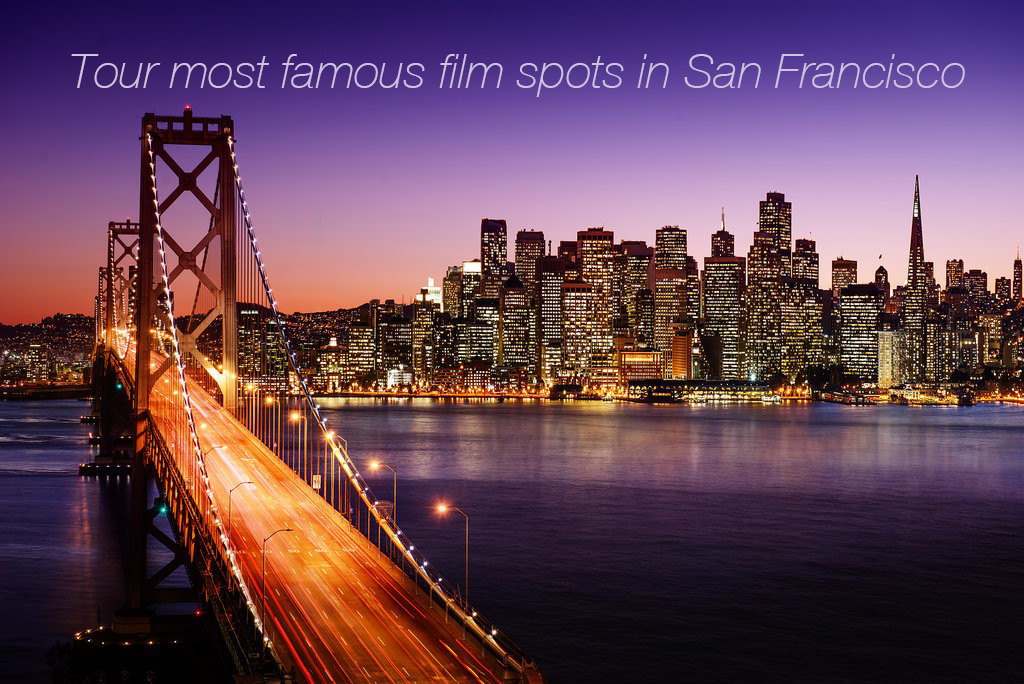
<style>
.page{position:relative;width:1024px;height:684px}
.page>*{position:absolute;margin:0}
.t1{font:48px "HelveticaNeue-ThinItalic";letter-spacing:-0.005em;color:#cec3e0}
</style>
<div class="page">
<p class="t1" style="left:71px;top:54px;width:894px;height:43px">Tour most famous film spots in San Francisco</p>
</div>
